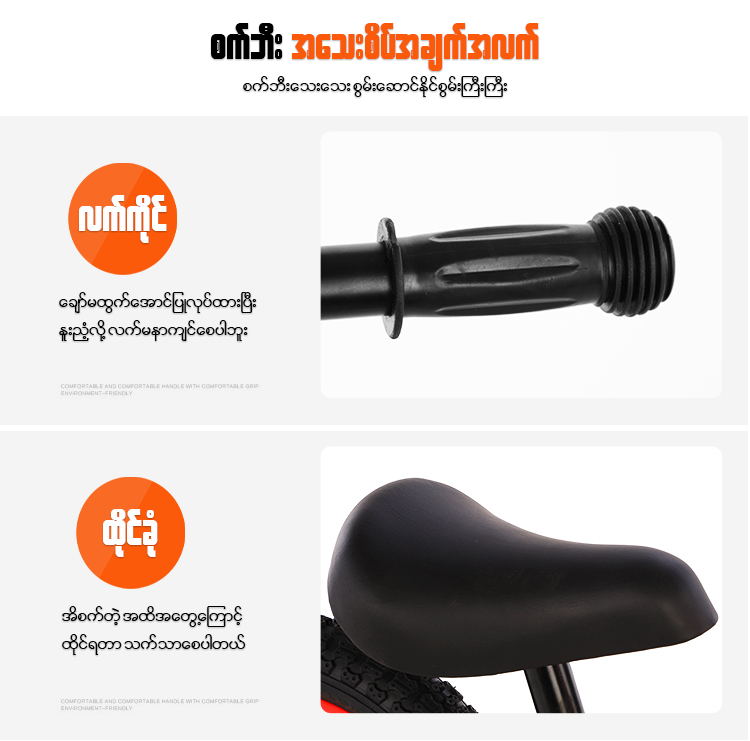
<style>
.page{position:relative;width:750px;height:741px;background:#f4f4f4}
.page>*{position:absolute;margin:0}
.t1{font:48px "W30ArtHouse";color:#fa5a0a}
.t2{font:48px "W30ArtHouse";color:#000000}
.t3{font:23.2px "W01ArtHouseWin";color:#000000}
.t4{font:48px "W30ArtHouse";color:#fefefe}
</style>
<div class="page">
<p class="t1" style="left:211px;top:23px;width:328px;height:48px"><span class="t2">pufbD; </span>tao;pdyftcsuftvuf</p>
<p class="t3" style="left:243px;top:76px;width:265px;height:21px">pufbD;ao;ao; pGrf;aqmifEdkifpGrf;BuD;BuD;</p>
<p class="t4" style="left:79px;top:195px;width:88px;height:48px">vufudkif</p>
<p class="t3" style="left:59px;top:292px;width:198px;height:49px">acsmfrxGufatmifjyKvkyfxm;NyD;<br>El;nHhvdkY vufremusifapygbl;</p>
<p class="t4" style="left:103px;top:509px;width:55px;height:48px">xdkifcHk</p>
<p class="t3" style="left:62px;top:606px;width:184px;height:49px">tdpufwJh txdtawGUaMumifh<br>xdkif&amp;wm oufomapygw,f</p>
</div>
